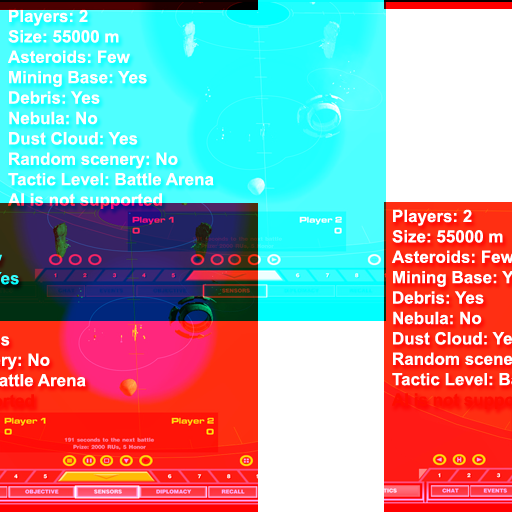
<style>
.page{position:relative;width:512px;height:512px;background:#ffffff}
.page>*{position:absolute;margin:0}
.t1{font:17px "Arial-BoldMT"}
</style>
<div class="page">
<p class="t1" style="left:8px;top:7px;width:206px;height:200px">Players: 2<br>Size: 55000 m<br>Asteroids: Few<br>Mining Base: Yes<br>Debris: Yes<br>Nebula: No<br>Dust Cloud: Yes<br>Random scenery: No<br>Tactic Level: Battle Arena<br>AI is not supported</p>
</div>
